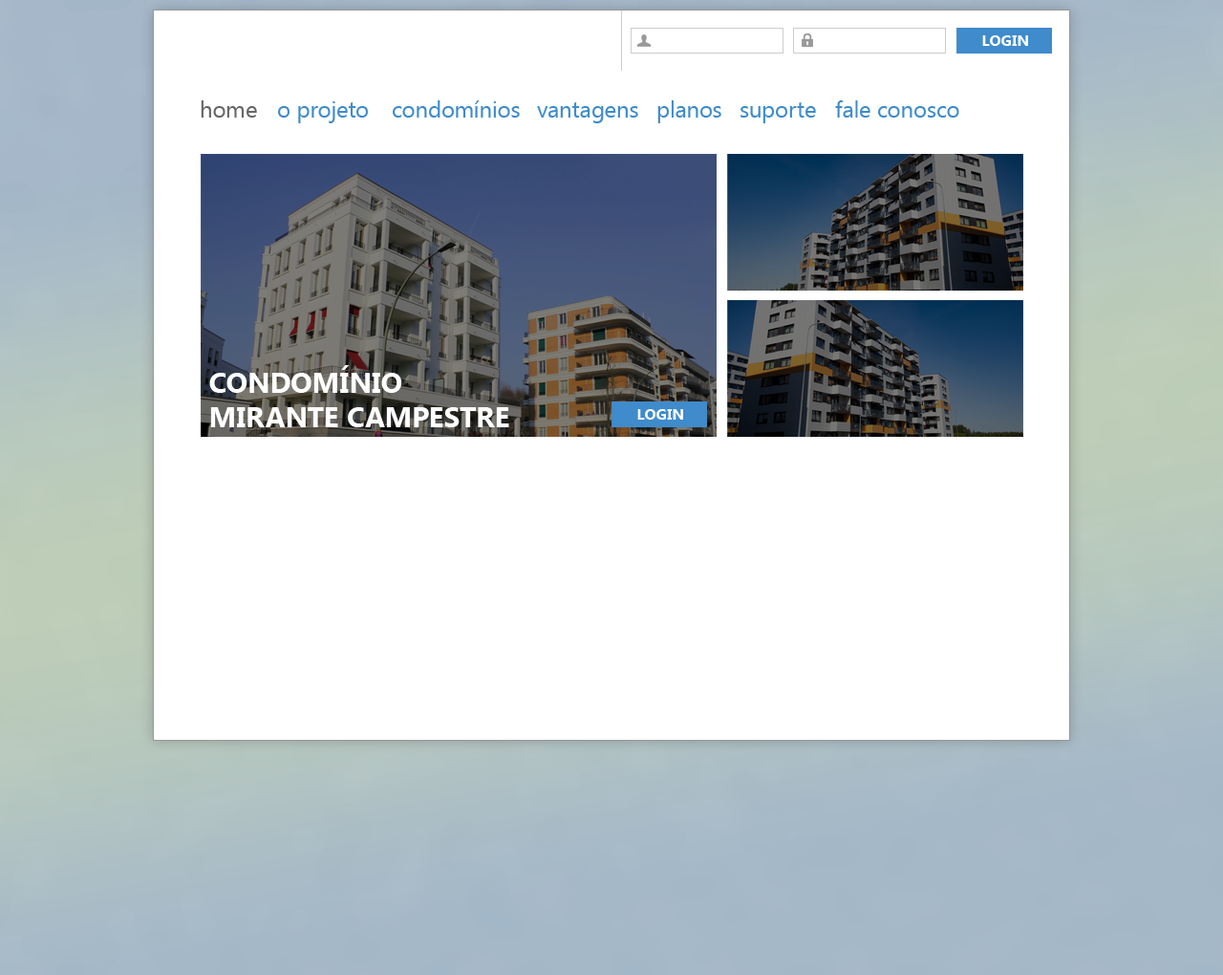
<style>
.page{position:relative;width:1223px;height:975px;background:#ffffff}
.page>*{position:absolute;margin:0}
.t1{font:15.3px "SegoeUI-Bold";color:#ffffff;text-transform:uppercase}
.t2{font:22.9px "SegoeUI";color:#666666}
.t3{font:22.9px "SegoeUI";color:#3f8bcb}
.t4{font:28.7px "SegoeUI-Bold";color:#ffffff;text-transform:uppercase}
</style>
<div class="page">
<p class="t1" style="left:982px;top:35px;width:46px;height:11px">login</p>
<p class="t2" style="left:201px;top:100px;width:56px;height:18px">home</p>
<p class="t3" style="left:278px;top:101px;width:90px;height:22px">o projeto</p>
<p class="t3" style="left:393px;top:100px;width:127px;height:18px">condomínios</p>
<p class="t3" style="left:658px;top:100px;width:64px;height:23px">planos</p>
<p class="t3" style="left:835px;top:100px;width:125px;height:18px">fale conosco</p>
<p class="t3" style="left:537px;top:102px;width:101px;height:21px">vantagens</p>
<p class="t3" style="left:741px;top:102px;width:75px;height:21px">suporte</p>
<p class="t4" style="left:209px;top:365px;width:300px;height:62px">condomínio<br>mirante campestre</p>
<p class="t1" style="left:637px;top:409px;width:46px;height:11px">login</p>
</div>
